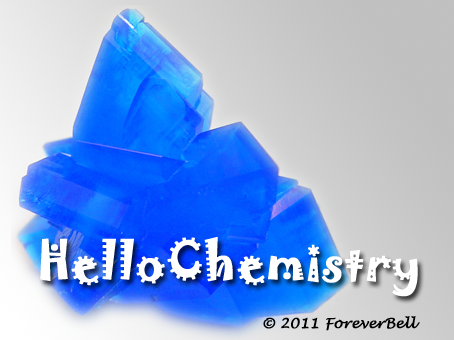
<style>
.page{position:relative;width:454px;height:340px}
.page>*{position:absolute;margin:0}
.t1{font:48px "Jokerman-Regular";color:#ffffff;font-weight:bold}
.t2{font:14px "LucidaHandwriting-Italic";color:#000000;font-weight:bold}
</style>
<div class="page">
<p class="t1" style="left:40px;top:237px;width:378px;height:60px">HelloChemistry</p>
<p class="t2" style="left:263px;top:316px;width:157px;height:15px">© 2011 ForeverBell</p>
</div>
